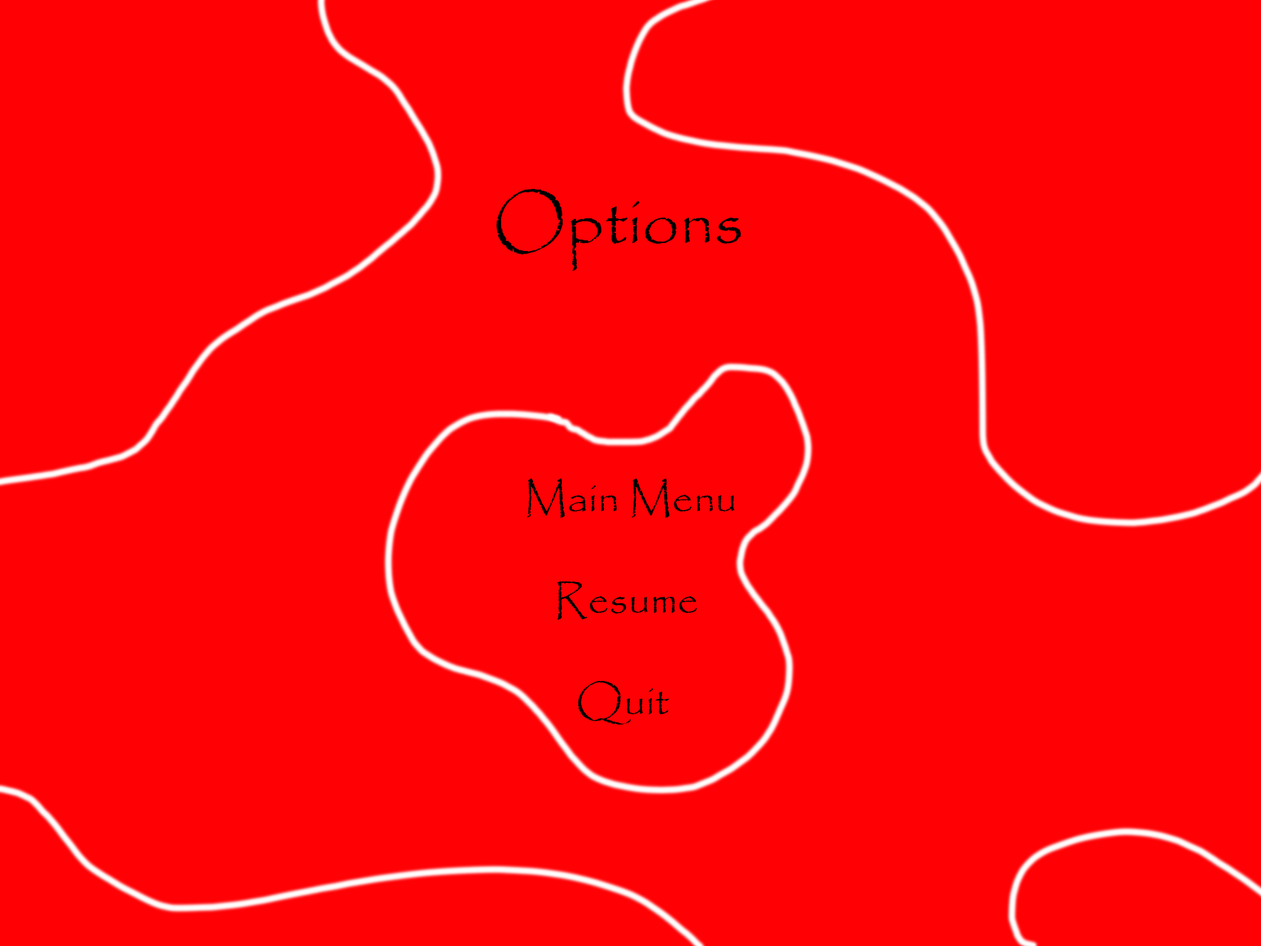
<style>
.page{position:relative;width:1261px;height:946px;background:#ff0004}
.page>*{position:absolute;margin:0}
.t1{font:66.7px "Papyrus-Regular";color:#000000}
.t2{font:42.3px "Papyrus-Regular";color:#000000}
</style>
<div class="page">
<p class="t1" style="left:496px;top:189px;width:245px;height:82px">Options</p>
<p class="t2" style="left:526px;top:478px;width:209px;height:247px">Main Menu<br><br>  Resume<br><br>                Quit</p>
</div>
